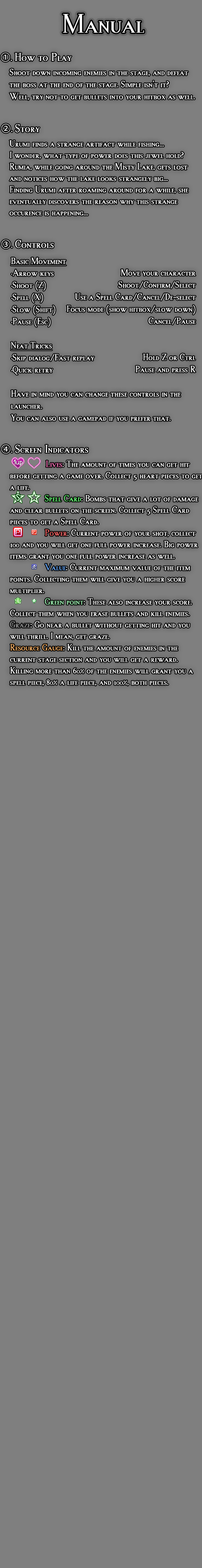
<style>
.page{position:relative;width:202px;height:1568px;background:#7f7f7f}
.page>*{position:absolute;margin:0}
.t1{font:28.7px "MarinCaps";color:#ffffff}
.t2{font:11.9px "MarinCaps";color:#ffffff}
.t3{font:9.6px "KozGoPr6N-Regular";color:#ffffff}
.t4{font:9.6px "MarinCaps";color:#ffffff}
.t5{font:9.6px "MarinCaps";color:#ffffff;text-decoration:underline}
.t6{font:9.6px "MarinCaps";color:#ff7bbf}
.t7{font:9.6px "MarinCaps";color:#6eff7c}
.t8{font:9.6px "MarinCaps";color:#ff6d6d}
.t9{font:9.6px "MarinCaps";color:#6badff}
.t10{font:9.6px "MarinCaps";color:#a9ffbd}
.t11{font:9.6px "MarinCaps";color:#9c9c9c}
.t12{font:9.6px "MarinCaps";color:#ffb86c}
</style>
<div class="page">
<p class="t1" style="left:63px;top:14px;width:81px;height:20px">Manual</p>
<p class="t2" style="left:1px;top:52px;width:71px;height:10px"><span class="t3">①. </span>How to Play</p>
<p class="t4" style="left:9px;top:69px;width:186px;height:31px">Shoot down incoming enemies in the stage, and defeat<br>the boss at the end of the stage. Simple isn’t it?<br>Well, try not to get bullets into your hitbox as well.</p>
<p class="t2" style="left:1px;top:124px;width:39px;height:9px"><span class="t3">②. </span>Story</p>
<p class="t4" style="left:9px;top:140px;width:179px;height:76px">Urumi finds a strange artifact while fishing...<br>I wonder, what type of power does this jewel hold?<br>Rumia, while going around the Misty Lake, gets lost<br>and notices how the lake looks strangely big...<br>Finding Urumi after roaming around for a while, she<br>eventually discovers the reason why this strange<br>occurence is happening...</p>
<p class="t2" style="left:1px;top:240px;width:53px;height:9px"><span class="t3">③. </span>Controls</p>
<p class="t4" style="left:11px;top:258px;width:169px;height:163px"><span class="t5">Basic Movement<br></span>·Arrow keys<br>·Shoot (Z)<br>·Spell (X)<br>·Slow (Shift)<br>·Pause (Esc)<br><br><span class="t5">Neat Tricks<br></span>·Skip dialog/Fast replay<br>·Quick retry<br><br>Have in mind you can change these controls in the<br>launcher.<br>You can also use a gamepad if you prefer that.</p>
<p class="t4" style="left:66px;top:269px;width:129px;height:104px;text-align:right"><span class="t5"><br></span>Move your character<br>Shoot/Confirm/Select<br>Use a Spell Card/Cancel/De-select<br>Focus mode (show hitbox/slow down)<br>Cancel/Pause<br><br><br>Hold Z or Ctrl<br>Pause and press R</p>
<p class="t2" style="left:1px;top:444px;width:87px;height:10px"><span class="t3">④. </span>Screen Indicators</p>
<p class="t4" style="left:10px;top:461px;width:192px;height:225px"><span class="t3">                </span><span class="t6">Lives</span>: The amount of times you can get hit <br>before getting a game over. Collect 5 heart pieces to get <br>a life.<br>   <span class="t7">Spell Card</span>: Bombs that give a lot of damage<br>and clear bullets on the screen. Collect 5 Spell Card <br>pieces to get a Spell Card. <br>   <span class="t8">Power</span>: Current power of your shot, collect <br>100 and you will get one full power increase. Big power<br>items grant you one full power increase as well.<br>   <span class="t9">Value</span>: Current maximum value of the item<br>points. Collecting them will give you a higher score<br>multiplier.<br>   <span class="t10">Green point</span>: These also increase your score.<br>Collect them when you erase bullets and kill enemies.<br><span class="t11">Graze</span>: Go near a bullet without getting hit and you<br>will thrill. I mean, get graze.<br><span class="t12">Resource Gauge</span>: Kill the amount of enemies in the<br>current stage section and you will get a reward.<br>Killing more than 60% of the enemies will grant you a<br>spell piece, 80% a life piece, and 100%, both pieces.</p>
</div>
